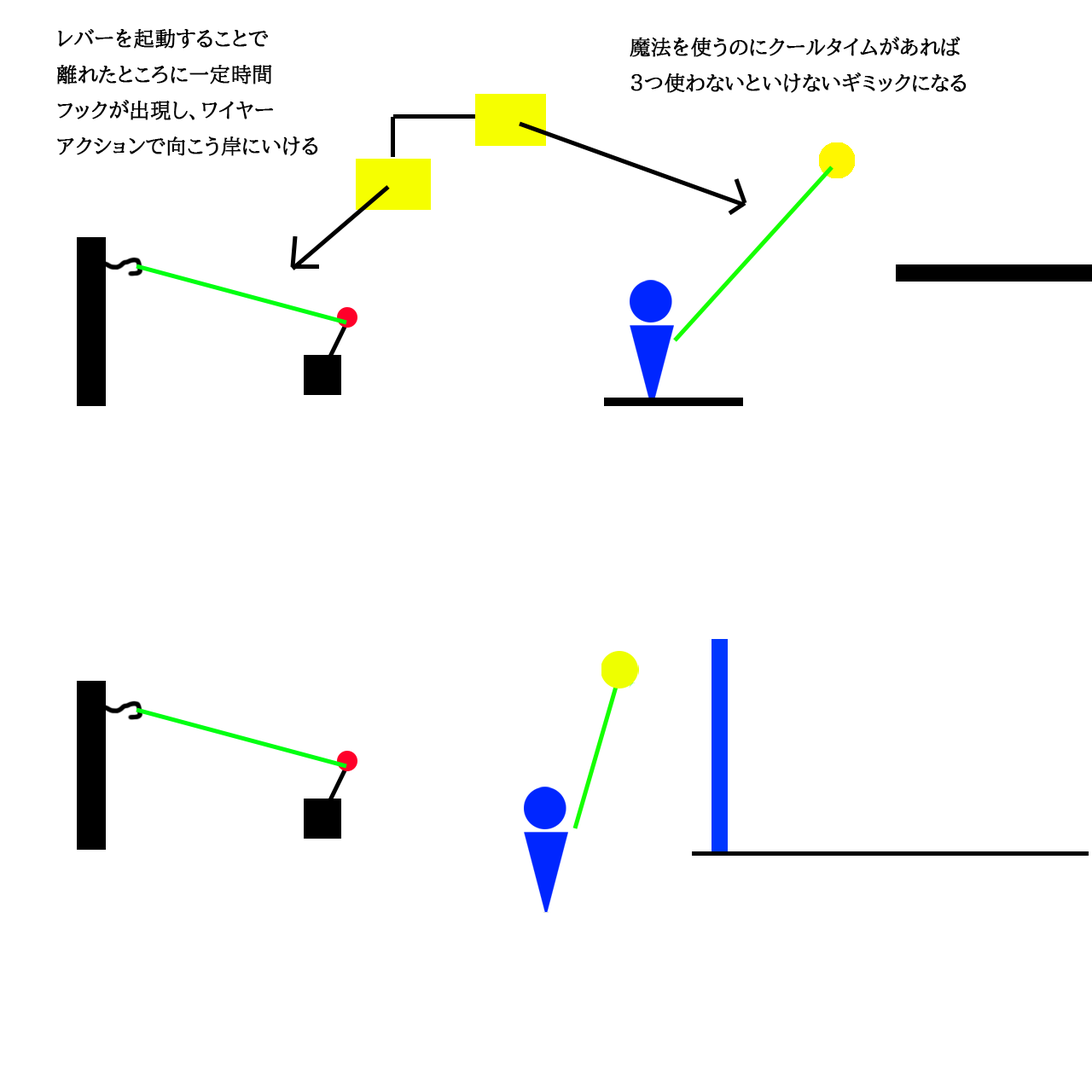
<style>
.page{position:relative;width:1092px;height:1092px;background:#ffffff}
.page>*{position:absolute;margin:0}
.t1{font:20.5px "BIZ-UDPMincho-Medium";color:#000000;font-weight:bold}
</style>
<div class="page">
<p class="t1" style="left:56px;top:29px;width:262px;height:127px">レバーを起動することで<br>離れたところに一定時間<br>フックが出現し、ワイヤー<br>アクションで向こう岸にいける</p>
<p class="t1" style="left:630px;top:37px;width:337px;height:56px">魔法を使うのにクールタイムがあれば<br>３つ使わないといけないギミックになる</p>
</div>
